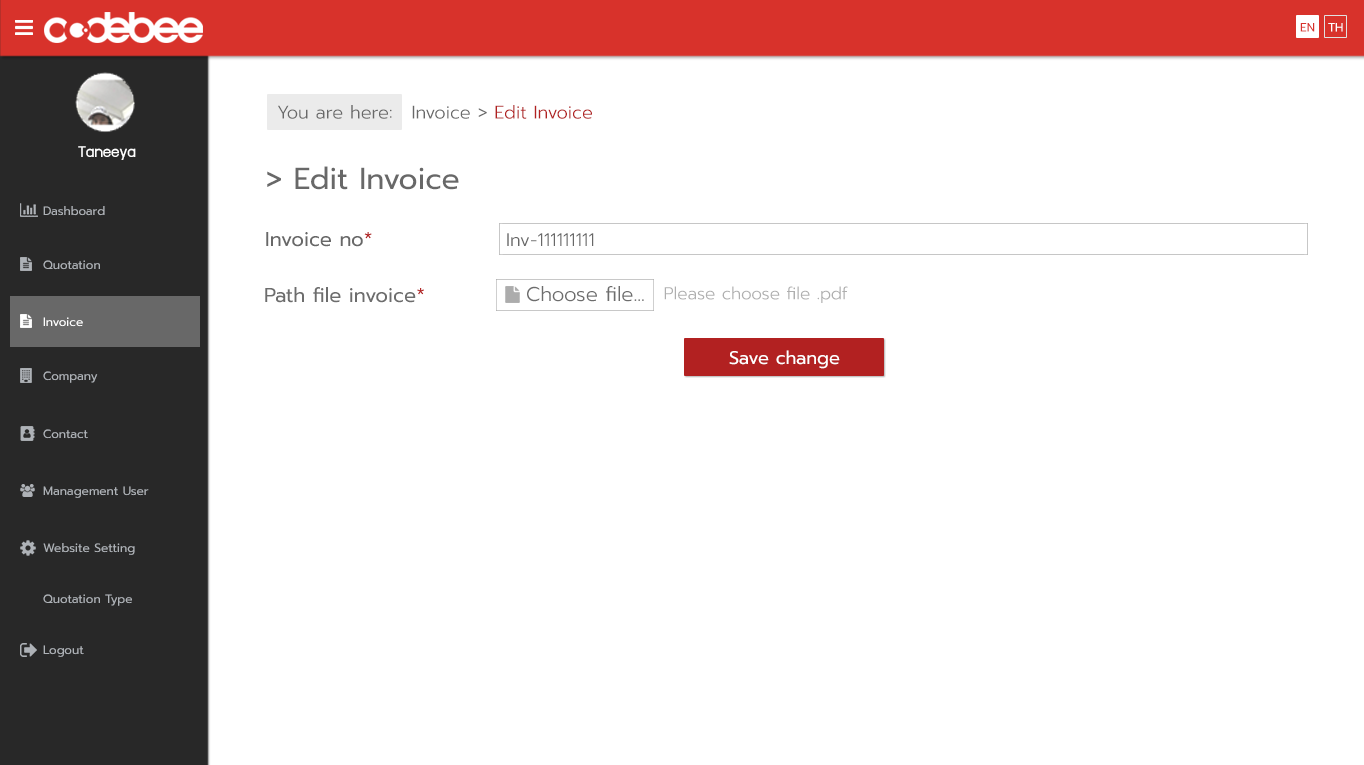
<style>
.page{position:relative;width:1364px;height:765px;background:#ffffff}
.page>*{position:absolute;margin:0}
.t1{font:12px "Prompt-Regular";color:#d8322b}
.t2{font:12px "Prompt-Regular";color:#ffffff}
.t3{font:18px "Prompt-Light";color:#686868}
.t4{font:18px "Prompt-Light";color:#b22121}
.t5{font:18px "supermarket";color:#ffffff}
.t6{font:30px "Prompt-Regular";color:#686868}
.t7{font:12px "Prompt-Regular";color:#aeb2b7}
.t8{font:20px "Prompt-Regular";color:#686868}
.t9{font:20px "Prompt-Regular";color:#b22121}
.t10{font:20px "Prompt-Light";color:#686868}
.t11{font:17px "Prompt-Light";color:#acacac}
.t12{font:18px "Prompt-Regular";color:#ffffff}
</style>
<div class="page">
<p class="t1" style="left:1300px;top:23px;width:15px;height:9px">EN</p>
<p class="t2" style="left:1328px;top:23px;width:15px;height:9px">TH</p>
<p class="t3" style="left:278px;top:105px;width:114px;height:14px">You are here:</p>
<p class="t4" style="left:412px;top:105px;width:180px;height:14px"><span class="t3">Invoice &gt; </span>Edit Invoice</p>
<p class="t5" style="left:78px;top:146px;width:58px;height:14px">Taneeya</p>
<p class="t6" style="left:267px;top:166px;width:192px;height:24px">&gt; Edit Invoice</p>
<p class="t7" style="left:43px;top:206px;width:62px;height:10px">Dashboard</p>
<p class="t8" style="left:266px;top:232px;width:106px;height:15px">Invoice no<span class="t9">*</span></p>
<p class="t3" style="left:507px;top:233px;width:87px;height:13px">Inv-111111111</p>
<p class="t7" style="left:43px;top:260px;width:57px;height:10px">Quotation</p>
<p class="t8" style="left:265px;top:287px;width:159px;height:16px">Path file invoice<span class="t9">*</span></p>
<p class="t10" style="left:527px;top:286px;width:117px;height:16px">Choose file...</p>
<p class="t11" style="left:664px;top:286px;width:184px;height:17px">Please choose file .pdf</p>
<p class="t2" style="left:43px;top:317px;width:40px;height:10px">Invoice</p>
<p class="t12" style="left:729px;top:350px;width:111px;height:19px">Save change</p>
<p class="t7" style="left:43px;top:371px;width:55px;height:12px">Company</p>
<p class="t7" style="left:43px;top:429px;width:45px;height:10px">Contact</p>
<p class="t7" style="left:43px;top:486px;width:106px;height:12px">Management User</p>
<p class="t7" style="left:43px;top:543px;width:92px;height:12px">Website Setting</p>
<p class="t7" style="left:43px;top:594px;width:89px;height:12px">Quotation Type</p>
<p class="t7" style="left:43px;top:645px;width:41px;height:12px">Logout</p>
</div>
